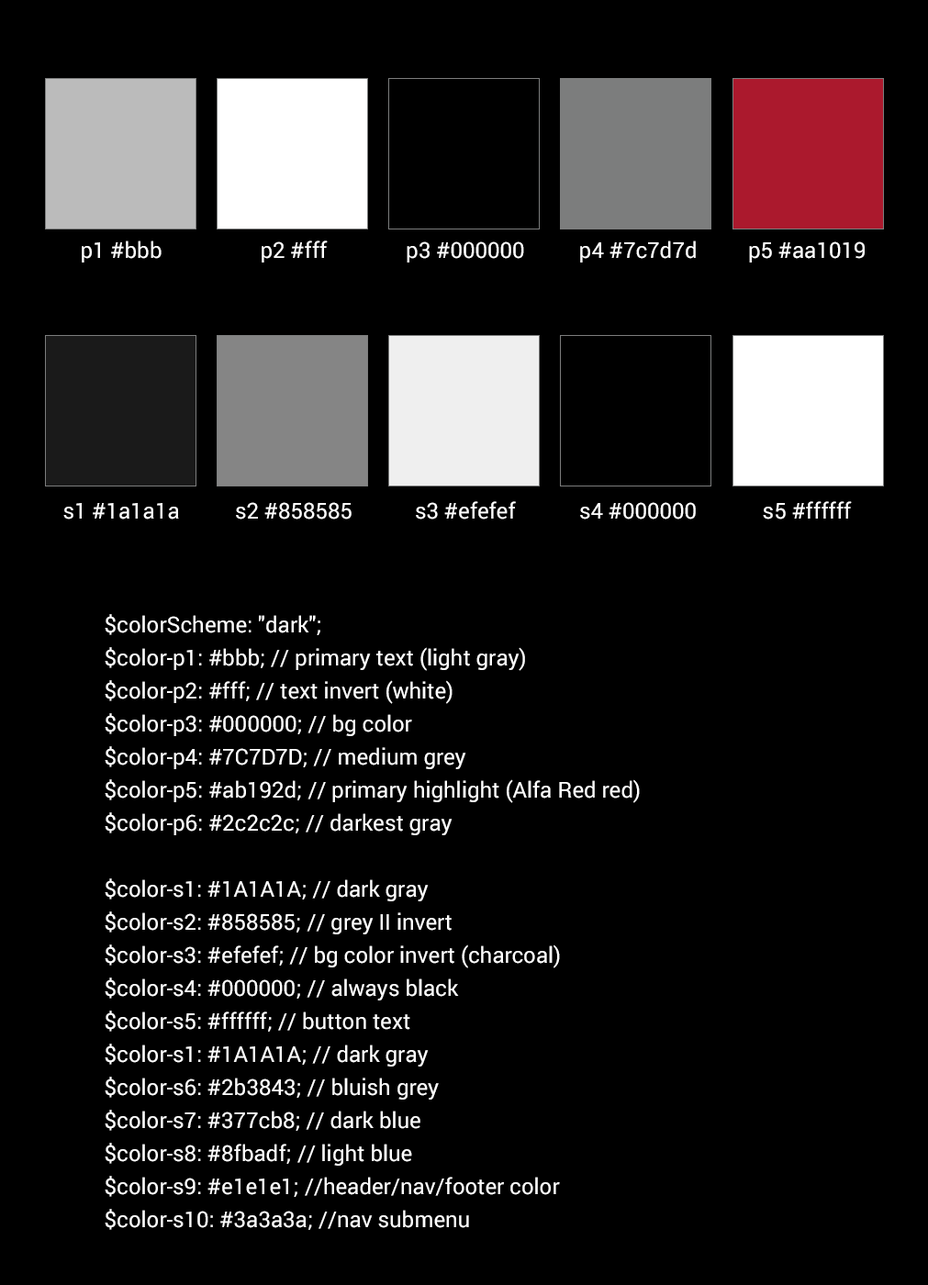
<style>
.page{position:relative;width:928px;height:1285px;background:#000000}
.page>*{position:absolute;margin:0}
.t1{font:22px "Roboto-Regular";color:#ffffff}
.t2{font:22px/33px "Roboto-Regular";color:#ffffff}
</style>
<div class="page">
<p class="t1" style="left:82px;top:240px;width:80px;height:23px">p1 #bbb</p>
<p class="t1" style="left:262px;top:240px;width:66px;height:23px">p2 #fff</p>
<p class="t1" style="left:407px;top:241px;width:117px;height:22px">p3 #000000</p>
<p class="t1" style="left:580px;top:240px;width:116px;height:23px">p4 #7c7d7d</p>
<p class="t1" style="left:749px;top:241px;width:116px;height:22px">p5 #aa1019</p>
<p class="t1" style="left:63px;top:503px;width:116px;height:17px">s1 #1a1a1a</p>
<p class="t1" style="left:236px;top:502px;width:116px;height:18px">s2 #858585</p>
<p class="t1" style="left:416px;top:501px;width:100px;height:19px">s3 #efefef</p>
<p class="t1" style="left:580px;top:502px;width:116px;height:18px">s4 #000000</p>
<p class="t1" style="left:763px;top:501px;width:89px;height:19px">s5 #ffffff</p>
<p class="t2" style="left:105px;top:614px;width:535px;height:616px">$colorScheme: "dark";<br>$color-p1: #bbb; // primary text (light gray)<br>$color-p2: #fff; // text invert (white)<br>$color-p3: #000000; // bg color<br>$color-p4: #7C7D7D; // medium grey<br>$color-p5: #ab192d; // primary highlight (Alfa Red red)<br>$color-p6: #2c2c2c; // darkest gray<br><br>$color-s1: #1A1A1A; // dark gray<br>$color-s2: #858585; // grey II invert<br>$color-s3: #efefef; // bg color invert (charcoal)<br>$color-s4: #000000; // always black<br>$color-s5: #ffffff; // button text<br>$color-s1: #1A1A1A; // dark gray<br>$color-s6: #2b3843; // bluish grey<br>$color-s7: #377cb8; // dark blue<br>$color-s8: #8fbadf; // light blue<br>$color-s9: #e1e1e1; //header/nav/footer color<br>$color-s10: #3a3a3a; //nav submenu</p>
</div>
